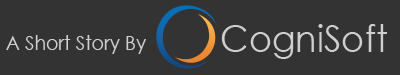
<style>
.page{position:relative;width:400px;height:75px;background:#333333}
.page>*{position:absolute;margin:0}
.t1{font:37.3px "CenturyGothic";color:#cfcfcf;scale:0.94 1}
.t2{font:20.1px "CenturyGothic";color:#cfcfcf;scale:0.94 1}
</style>
<div class="page">
<p class="t1" style="left:221px;top:24px;width:166px;height:35px">CogniSoft</p>
<p class="t2" style="left:6px;top:35px;width:140px;height:19px">A Short Story By</p>
</div>
